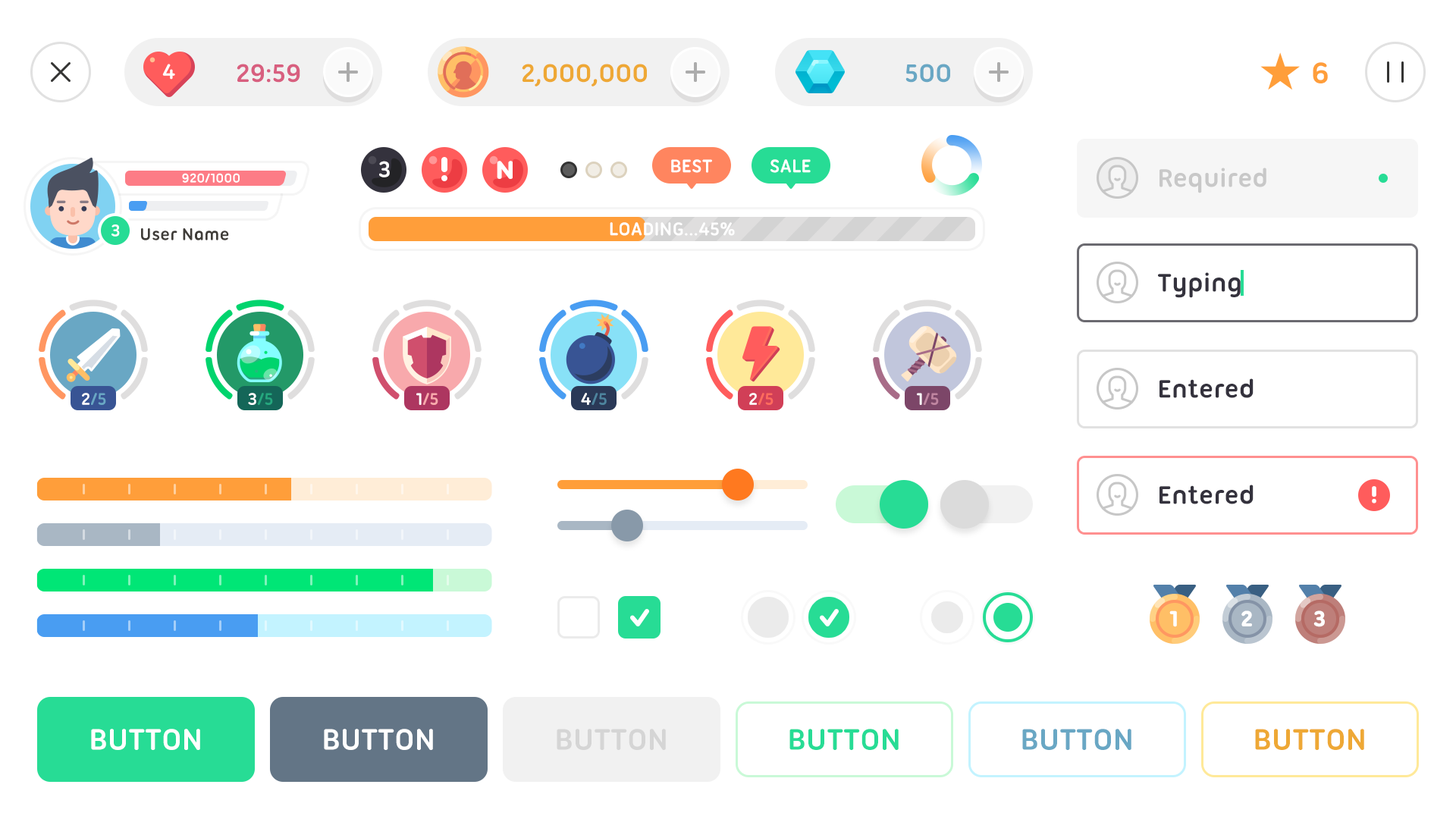
<style>
.page{position:relative;width:1456px;height:819px;background:#ffffff}
.page>*{position:absolute;margin:0}
.t1{font:22.7px "UbuntuTitling-Bold";color:#ffffff;text-transform:uppercase}
.t2{font:27.3px "UbuntuTitling-Bold";color:#d85f7f;text-transform:uppercase}
.t3{font:27.3px "UbuntuTitling-Bold";color:#eea835;text-transform:uppercase}
.t4{font:27.3px "UbuntuTitling-Bold";color:#69a7c4;text-transform:uppercase}
.t5{font:31.8px "UbuntuTitling-Bold";color:#ff9e3a}
.t6{font:24.3px "UbuntuTitling-Bold";color:#ffffff}
.t7{font:25.9px "UbuntuTitling-Bold";color:#ffffff;text-transform:uppercase;font-weight:bold;scale:1.11 1}
.t8{font:19.7px "UbuntuTitling-Bold";color:#ffffff;text-transform:uppercase}
.t9{font:13.6px "UbuntuTitling-Bold";color:#ffffff}
.t10{font:27.3px "UbuntuTitling-Bold";color:#b2b2b2}
.t11{font:18.2px "UbuntuTitling-Bold";color:#ffffff}
.t12{font:18.2px "UbuntuTitling-Bold";color:#3f3c38}
.t13{font:27.3px "UbuntuTitling-Bold";color:#34323d}
.t14{font:18.2px "UbuntuTitling-Bold";color:#69a7c4}
.t15{font:18.2px "UbuntuTitling-Bold";color:#25a87e}
.t16{font:18.2px "UbuntuTitling-Bold";color:#f8a9ac}
.t17{font:18.2px "UbuntuTitling-Bold";color:#4d849e}
.t18{font:18.2px "UbuntuTitling-Bold";color:#ff6c5d}
.t19{font:18.2px "UbuntuTitling-Bold";color:#bf85a0}
.t20{font:22.7px "UbuntuTitling-Bold";color:#ffffff;font-weight:bold}
.t21{font:31.8px "UbuntuTitling-Bold";color:#ffffff;text-transform:uppercase}
.t22{font:31.8px "UbuntuTitling-Bold";color:#d5d5d5;text-transform:uppercase}
.t23{font:31.8px "UbuntuTitling-Bold";color:#27dc95;text-transform:uppercase}
.t24{font:31.8px "UbuntuTitling-Bold";color:#69a7c4;text-transform:uppercase}
.t25{font:31.8px "UbuntuTitling-Bold";color:#eea835;text-transform:uppercase}
</style>
<div class="page">
<p class="t1" style="left:162px;top:64px;width:13px;height:16px">4</p>
<p class="t2" style="left:237px;top:64px;width:63px;height:19px">29:59</p>
<p class="t3" style="left:522px;top:64px;width:125px;height:22px">2,000,000</p>
<p class="t4" style="left:905px;top:64px;width:45px;height:19px">500</p>
<p class="t5" style="left:1313px;top:62px;width:15px;height:21px">6</p>
<p class="t6" style="left:379px;top:161px;width:11px;height:16px">3</p>
<p class="t7" style="left:497px;top:161px;width:16px;height:18px">N</p>
<p class="t8" style="left:671px;top:159px;width:41px;height:14px">Best</p>
<p class="t8" style="left:770px;top:159px;width:41px;height:14px">sale</p>
<p class="t9" style="left:182px;top:173px;width:58px;height:10px">920/1000</p>
<p class="t10" style="left:1159px;top:168px;width:107px;height:25px;opacity:0.7">Required</p>
<p class="t11" style="left:111px;top:224px;width:9px;height:13px">3</p>
<p class="t12" style="left:141px;top:228px;width:88px;height:12px">User Name</p>
<p class="t8" style="left:610px;top:222px;width:125px;height:14px">Loading...45%</p>
<p class="t13" style="left:1158px;top:272px;width:83px;height:26px">Typing</p>
<p class="t13" style="left:1159px;top:378px;width:95px;height:20px">Entered</p>
<p class="t14" style="left:82px;top:393px;width:24px;height:12px"><span class="t11">2</span>/5</p>
<p class="t15" style="left:248px;top:393px;width:25px;height:12px"><span class="t11">3</span>/5</p>
<p class="t16" style="left:416px;top:393px;width:22px;height:12px"><span class="t11">1</span>/5</p>
<p class="t17" style="left:581px;top:393px;width:26px;height:12px"><span class="t11">4</span>/5</p>
<p class="t18" style="left:749px;top:393px;width:24px;height:12px"><span class="t11">2</span>/5</p>
<p class="t19" style="left:917px;top:393px;width:22px;height:12px"><span class="t11">1</span>/5</p>
<p class="t13" style="left:1159px;top:485px;width:95px;height:19px">Entered</p>
<p class="t20" style="left:1169px;top:610px;width:8px;height:17px">1</p>
<p class="t20" style="left:1241px;top:610px;width:11px;height:16px">2</p>
<p class="t20" style="left:1313px;top:610px;width:12px;height:17px">3</p>
<p class="t21" style="left:91px;top:729px;width:109px;height:21px">button</p>
<p class="t21" style="left:324px;top:729px;width:109px;height:21px">button</p>
<p class="t22" style="left:557px;top:729px;width:109px;height:21px">button</p>
<p class="t23" style="left:789px;top:729px;width:110px;height:21px">button</p>
<p class="t24" style="left:1022px;top:729px;width:109px;height:21px">button</p>
<p class="t25" style="left:1255px;top:729px;width:109px;height:21px">button</p>
</div>
